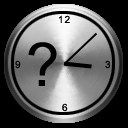
<style>
.page{position:relative;width:128px;height:128px;background:#000000}
.page>*{position:absolute;margin:0}
.t1{font:10px "ArialMT";letter-spacing:0.055em;color:#000000}
.t2{font:60px "ArialMT";letter-spacing:0.055em;color:#000000}
</style>
<div class="page">
<p class="t1" style="left:59px;top:15px;width:11px;height:8px">12</p>
<p class="t2" style="left:28px;top:42px;width:29px;height:44px">?</p>
<p class="t1" style="left:15px;top:60px;width:6px;height:9px">9</p>
<p class="t1" style="left:105px;top:60px;width:6px;height:9px">3</p>
<p class="t1" style="left:62px;top:103px;width:6px;height:9px">6</p>
</div>
